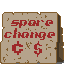
<style>
.page{position:relative;width:64px;height:64px;background:#b5a38b}
.page>*{position:absolute;margin:0}
.t1{font:16.7px/12.5px "AlphaBetaBRK";color:#9e2828;scale:0.97 1}
.t2{font:16.7px "AlphaBetaBRK";color:#9e2828}
.t3{font:24.5px "AlphaBetaBRK";color:#9e2828}
</style>
<div class="page">
<p class="t1" style="left:4px;top:20px;width:51px;height:20px;text-align:center">spare<br>change</p>
<p class="t2" style="left:34px;top:41px;width:8px;height:16px">$</p>
<p class="t3" style="left:12px;top:44px;width:11px;height:9px">c</p>
</div>
